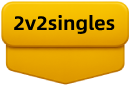
<style>
.page{position:relative;width:130px;height:85px}
.page>*{position:absolute;margin:0}
.t1{font:19.6px "AlibabaPuHuiTi-Bold";color:#000000}
</style>
<div class="page">
<p class="t1" style="left:14px;top:15px;width:101px;height:19px">2v2singles</p>
</div>
